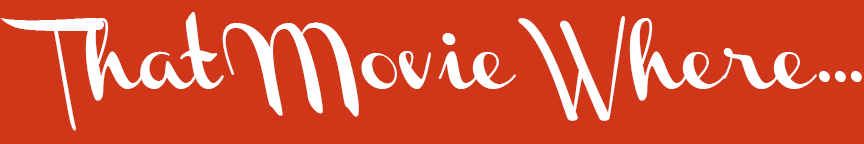
<style>
.page{position:relative;width:864px;height:144px;background:#d03719}
.page>*{position:absolute;margin:0}
.t1{font:60px "ChannelLeft-Slanted";color:#ffffff}
</style>
<div class="page">
<p class="t1" style="left:0px;top:12px;width:862px;height:119px">That Movie Where...</p>
</div>
